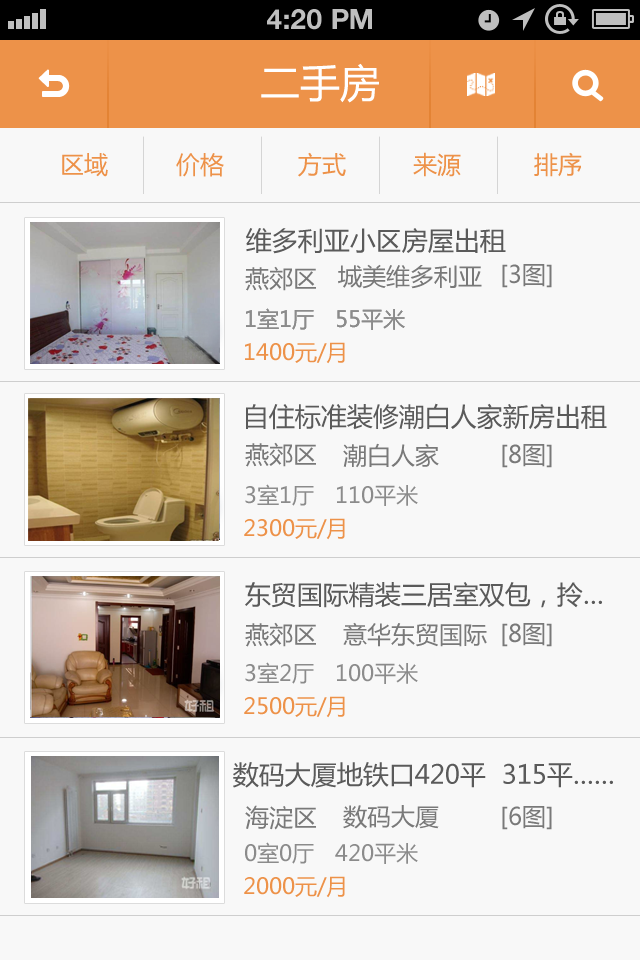
<style>
.page{position:relative;width:640px;height:960px;background:#f8f8f8}
.page>*{position:absolute;margin:0}
.t1{font:28px "HelveticaNeue-Bold";color:#bfbfbf;text-transform:uppercase}
.t2{font:40px "MicrosoftYaHei";color:#ffffff}
.t3{font:24px "MicrosoftYaHei";color:#ed9249}
.t4{font:26px "MicrosoftYaHei";color:#5a5a5a}
.t5{font:24px "MicrosoftYaHei";color:#797979}
.t6{font:22px "MicrosoftYaHei";color:#8b8b8b}
.t7{font:22px "MicrosoftYaHei";color:#ed9249}
</style>
<div class="page">
<p class="t1" style="left:267px;top:9px;width:105px;height:21px">4:20 PM</p>
<p class="t2" style="left:261px;top:63px;width:118px;height:40px">二手房</p>
<p class="t3" style="left:62px;top:153px;width:46px;height:24px">区域</p>
<p class="t3" style="left:176px;top:153px;width:48px;height:24px">价格</p>
<p class="t3" style="left:298px;top:152px;width:48px;height:25px">方式</p>
<p class="t3" style="left:413px;top:152px;width:48px;height:25px">来源</p>
<p class="t3" style="left:534px;top:152px;width:48px;height:25px">排序</p>
<p class="t4" style="left:246px;top:228px;width:260px;height:26px">维多利亚小区房屋出租</p>
<p class="t5" style="left:245px;top:266px;width:71px;height:25px">燕郊区</p>
<p class="t5" style="left:338px;top:264px;width:144px;height:25px">城美维多利亚</p>
<p class="t5" style="left:502px;top:264px;width:50px;height:24px">[3图]</p>
<p class="t6" style="left:246px;top:308px;width:159px;height:22px">1室1厅   55平米</p>
<p class="t6" style="left:246px;top:308px;width:159px;height:22px">1室1厅   55平米</p>
<p class="t7" style="left:245px;top:342px;width:100px;height:22px">1400元/月</p>
<p class="t4" style="left:246px;top:403px;width:361px;height:27px">自住标准装修潮白人家新房出租</p>
<p class="t5" style="left:245px;top:442px;width:71px;height:25px">燕郊区</p>
<p class="t5" style="left:343px;top:443px;width:96px;height:25px">潮白人家</p>
<p class="t5" style="left:502px;top:444px;width:50px;height:24px">[8图]</p>
<p class="t6" style="left:245px;top:484px;width:173px;height:22px">3室1厅   110平米</p>
<p class="t7" style="left:244px;top:518px;width:101px;height:22px">2300元/月</p>
<p class="t4" style="left:245px;top:582px;width:357px;height:26px">东贸国际精装三居室双包，拎…</p>
<p class="t5" style="left:245px;top:622px;width:71px;height:25px">燕郊区</p>
<p class="t5" style="left:343px;top:622px;width:144px;height:25px">意华东贸国际</p>
<p class="t5" style="left:502px;top:623px;width:50px;height:24px">[8图]</p>
<p class="t6" style="left:245px;top:662px;width:173px;height:22px">3室2厅   100平米</p>
<p class="t7" style="left:244px;top:696px;width:101px;height:22px">2500元/月</p>
<p class="t4" style="left:233px;top:762px;width:380px;height:26px">数码大厦地铁口420平  315平……</p>
<p class="t5" style="left:245px;top:805px;width:71px;height:25px">海淀区</p>
<p class="t5" style="left:343px;top:805px;width:96px;height:24px">数码大厦</p>
<p class="t5" style="left:502px;top:806px;width:50px;height:24px">[6图]</p>
<p class="t6" style="left:245px;top:842px;width:173px;height:22px">0室0厅   420平米</p>
<p class="t7" style="left:244px;top:876px;width:101px;height:22px">2000元/月</p>
</div>
